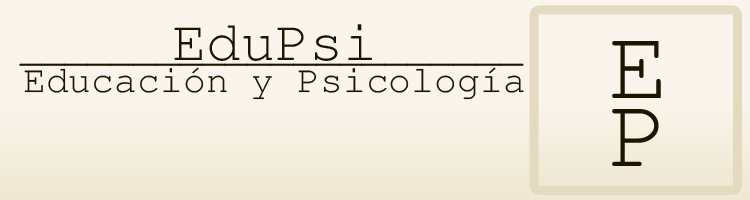
<style>
.page{position:relative;width:750px;height:200px;background:#faf5ec}
.page>*{position:absolute;margin:0}
.t1{font:57.1px "FreeMono";color:#1c1502}
.t2{font:101.1px/67.4px "FreeMono";color:#1c1502}
.t3{font:38.1px "FreeMono";color:#1c1502}
</style>
<div class="page">
<p class="t1" style="left:174px;top:24px;width:198px;height:37px">EduPsi</p>
<p class="t2" style="left:612px;top:41px;width:49px;height:125px;text-align:center">E<br>P</p>
<p class="t3" style="left:19px;top:63px;width:505px;height:3px">______________________</p>
<p class="t3" style="left:24px;top:67px;width:500px;height:33px">Educación y Psicología</p>
</div>
